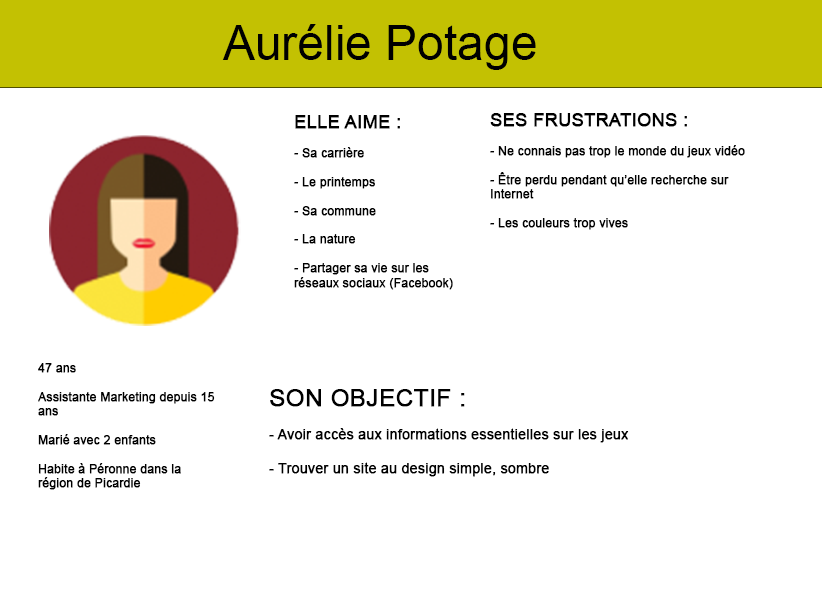
<style>
.page{position:relative;width:822px;height:595px;background:#ffffff}
.page>*{position:absolute;margin:0}
.t1{font:48px "ArialMT";color:#000000}
.t2{font:12px "ArialMT";color:#000000;font-weight:bold}
.t3{font:18px "ArialMT";color:#000000;font-weight:bold}
.t4{font:14px "ArialMT";color:#000000;font-weight:bold}
.t5{font:24px "ArialMT";color:#000000;font-weight:bold}
</style>
<div class="page">
<p class="t1" style="left:222px;top:24px;width:314px;height:46px">Aurélie Potage</p>
<p class="t2" style="left:490px;top:113px;width:255px;height:117px"><span class="t3">SES FRUSTRATIONS :</span><br><br>- Ne connais pas trop le monde du jeux vidéo<br><br>- Être perdu pendant qu’elle recherche sur Internet<br><br>- Les couleurs trop vives</p>
<p class="t2" style="left:294px;top:115px;width:159px;height:175px"><span class="t3">ELLE AIME : </span><br><br>- Sa carrière<br><br>- Le printemps<br><br>- Sa commune<br><br>- La nature <br><br>- Partager sa vie sur les réseaux sociaux (Facebook)</p>
<p class="t2" style="left:38px;top:363px;width:177px;height:127px">47 ans<br><br>Assistante Marketing depuis 15 ans<br><br>Marié avec 2 enfants<br><br>Habite à Péronne dans la région de Picardie</p>
<p class="t4" style="left:269px;top:389px;width:360px;height:88px"><span class="t5">SON OBJECTIF :</span><br><br>- Avoir accès aux informations essentielles sur les jeux<br><br>- Trouver un site au design simple, sombre</p>
</div>
